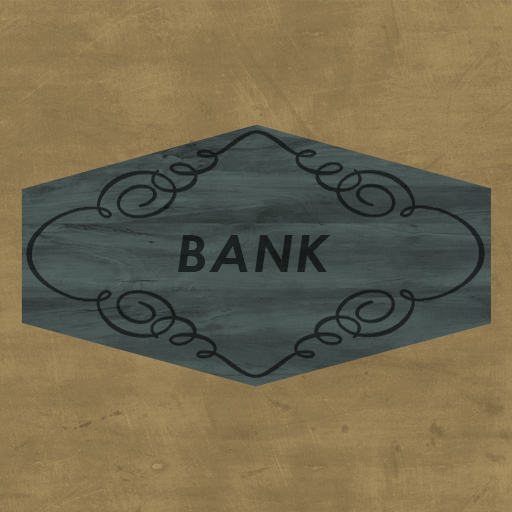
<style>
.page{position:relative;width:512px;height:512px}
.page>*{position:absolute;margin:0}
.t1{font:52px "CenturyGothic-BoldItalic";letter-spacing:0.025em;color:#191f1d;text-transform:uppercase;scale:1.07 1}
</style>
<div class="page">
<p class="t1" style="left:178px;top:235px;width:153px;height:37px">bank</p>
</div>
